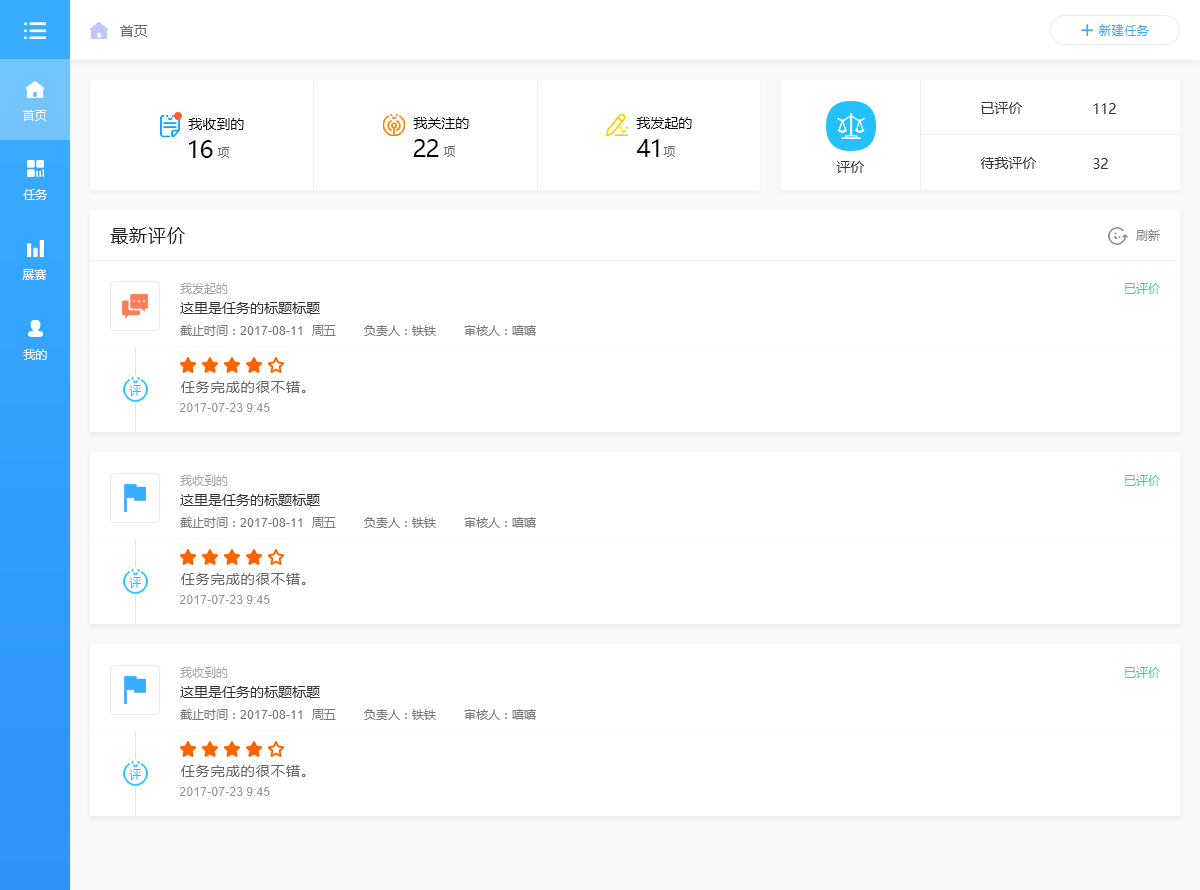
<style>
.page{position:relative;width:1200px;height:890px;background:#ffffff}
.page>*{position:absolute;margin:0}
.t1{font:14px "MicrosoftYaHei";color:#666666}
.t2{font:12px "MicrosoftYaHei";letter-spacing:0.05em;color:#38adff}
.t3{font:14px "MicrosoftYaHei";color:#333333}
.t4{font:12px "MicrosoftYaHei";color:#ffffff}
.t5{font:14px "MicrosoftYaHei";color:#070707}
.t6{font:24px "MicrosoftYaHei";letter-spacing:-0.025em;color:#070707}
.t7{font:12px "MicrosoftYaHei";color:#666666}
.t8{font:18px "MicrosoftYaHei";letter-spacing:0.05em;color:#222222}
.t9{font:12px "MicrosoftYaHei";color:#888888}
.t10{font:12px "MicrosoftYaHei";color:#a3a3a3}
.t11{font:12px "MicrosoftYaHei";color:#3fcca7}
.t12{font:12px "MicrosoftYaHei";color:#777777}
.t13{font:12px "ArialMT";color:#777777}
.t14{font:12px "MicrosoftYaHei";letter-spacing:0.075em;color:#25c1ff}
.t15{font:14px "MicrosoftYaHei";letter-spacing:0.075em;color:#666666}
.t16{font:12px "ArialMT";color:#999999}
</style>
<div class="page">
<p class="t1" style="left:120px;top:25px;width:28px;height:12px">首页</p>
<p class="t2" style="left:1099px;top:24px;width:50px;height:12px">新建任务</p>
<p class="t3" style="left:981px;top:102px;width:41px;height:12px">已评价</p>
<p class="t4" style="left:23px;top:110px;width:24px;height:11px">首页</p>
<p class="t3" style="left:1093px;top:103px;width:23px;height:11px">112</p>
<p class="t5" style="left:188px;top:118px;width:56px;height:12px">我收到的</p>
<p class="t5" style="left:413px;top:117px;width:56px;height:12px">我关注的</p>
<p class="t5" style="left:636px;top:117px;width:56px;height:12px">我发起的</p>
<p class="t6" style="left:189px;top:140px;width:24px;height:18px">16</p>
<p class="t7" style="left:217px;top:147px;width:12px;height:11px">项</p>
<p class="t6" style="left:413px;top:139px;width:26px;height:18px">22</p>
<p class="t7" style="left:443px;top:146px;width:12px;height:11px">项</p>
<p class="t6" style="left:636px;top:139px;width:23px;height:18px">41</p>
<p class="t7" style="left:663px;top:146px;width:12px;height:11px">项</p>
<p class="t3" style="left:836px;top:161px;width:28px;height:12px">评价</p>
<p class="t3" style="left:980px;top:157px;width:56px;height:12px">待我评价</p>
<p class="t3" style="left:1093px;top:158px;width:15px;height:11px">32</p>
<p class="t4" style="left:23px;top:189px;width:24px;height:11px">任务</p>
<p class="t8" style="left:110px;top:227px;width:75px;height:17px">最新评价</p>
<p class="t9" style="left:1136px;top:229px;width:24px;height:12px">刷新</p>
<p class="t4" style="left:22px;top:269px;width:24px;height:11px">展赛</p>
<p class="t10" style="left:180px;top:283px;width:48px;height:11px">我发起的</p>
<p class="t11" style="left:1125px;top:283px;width:35px;height:11px">已评价</p>
<p class="t3" style="left:180px;top:302px;width:140px;height:12px">这里是任务的标题标题</p>
<p class="t12" style="left:180px;top:325px;width:356px;height:11px">截止时间：<span class="t13">2017-08-11</span>  周五       负责人：铁铁       审核人：嘻嘻</p>
<p class="t4" style="left:23px;top:349px;width:24px;height:11px">我的</p>
<p class="t14" style="left:129px;top:385px;width:13px;height:11px">评</p>
<p class="t15" style="left:181px;top:381px;width:125px;height:12px">任务完成的很不错。</p>
<p class="t16" style="left:179px;top:403px;width:91px;height:9px">2017-07-23 9:45</p>
<p class="t10" style="left:180px;top:475px;width:48px;height:11px">我收到的</p>
<p class="t11" style="left:1125px;top:475px;width:35px;height:11px">已评价</p>
<p class="t3" style="left:180px;top:494px;width:140px;height:12px">这里是任务的标题标题</p>
<p class="t12" style="left:180px;top:517px;width:356px;height:11px">截止时间：<span class="t13">2017-08-11</span>  周五       负责人：铁铁       审核人：嘻嘻</p>
<p class="t14" style="left:129px;top:577px;width:13px;height:11px">评</p>
<p class="t15" style="left:181px;top:573px;width:125px;height:12px">任务完成的很不错。</p>
<p class="t16" style="left:179px;top:595px;width:91px;height:9px">2017-07-23 9:45</p>
<p class="t10" style="left:180px;top:667px;width:48px;height:11px">我收到的</p>
<p class="t11" style="left:1125px;top:667px;width:35px;height:11px">已评价</p>
<p class="t3" style="left:180px;top:686px;width:140px;height:12px">这里是任务的标题标题</p>
<p class="t12" style="left:180px;top:709px;width:356px;height:11px">截止时间：<span class="t13">2017-08-11</span>  周五       负责人：铁铁       审核人：嘻嘻</p>
<p class="t14" style="left:129px;top:769px;width:13px;height:11px">评</p>
<p class="t15" style="left:181px;top:765px;width:125px;height:12px">任务完成的很不错。</p>
<p class="t16" style="left:179px;top:787px;width:91px;height:9px">2017-07-23 9:45</p>
</div>
